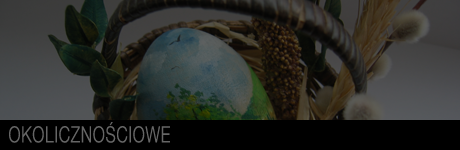
<style>
.page{position:relative;width:460px;height:150px}
.page>*{position:absolute;margin:0}
.t1{font:22.4px "HelveticaNeueCE-Light";letter-spacing:0.05em;color:#666666;scale:0.71 1}
</style>
<div class="page">
<p class="t1" style="left:9px;top:122px;width:161px;height:21px">OKOLICZNOŚCIOWE</p>
</div>
